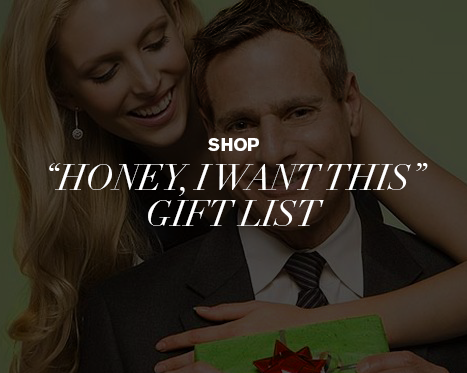
<style>
.page{position:relative;width:467px;height:373px}
.page>*{position:absolute;margin:0}
.t1{font:18px "AkzidenzGroteskBE-Bold";letter-spacing:-0.04em;color:#ffffff}
.t2{font:36px/36px "Didot-Italic";letter-spacing:-0.02em;color:#ffffff}
</style>
<div class="page">
<p class="t1" style="left:208px;top:138px;width:51px;height:13px">SHOP</p>
<p class="t2" style="left:49px;top:163px;width:379px;height:63px;text-align:center">“HONEY, I WANT THIS” GIFT LIST</p>
</div>
